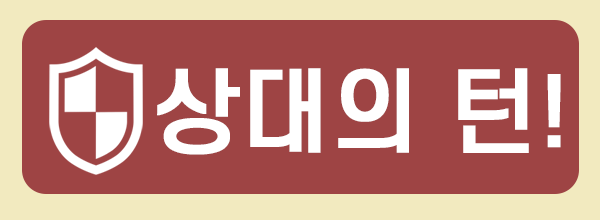
<style>
.page{position:relative;width:600px;height:220px;background:#9e4444}
.page>*{position:absolute;margin:0}
.t1{font:91.8px "S-CoreDream-5Medium";color:#ffffff;font-weight:bold}
</style>
<div class="page">
<p class="t1" style="left:157px;top:68px;width:404px;height:87px">상대의 턴!</p>
</div>
